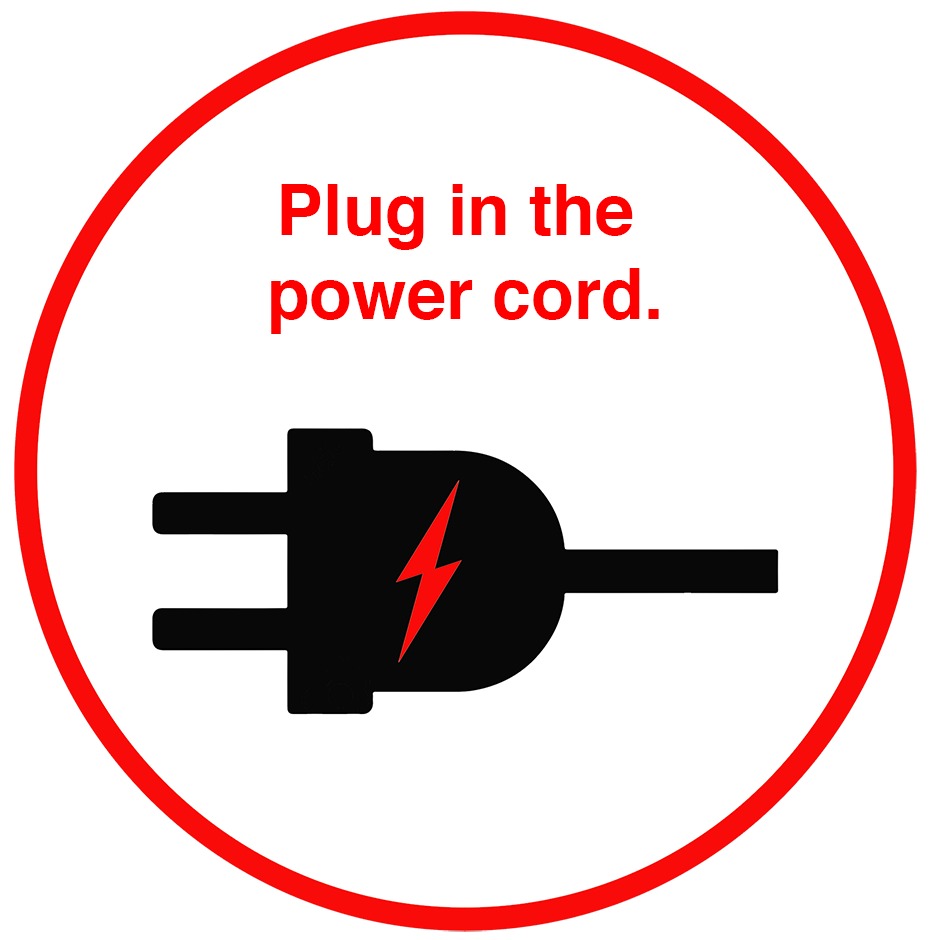
<style>
.page{position:relative;width:930px;height:940px;background:#ffffff}
.page>*{position:absolute;margin:0}
.t1{font:70px "Helvetica-Bold";color:#ff0000}
</style>
<div class="page">
<p class="t1" style="left:271px;top:184px;width:388px;height:150px;text-align:center">Plug in the <br>power cord.</p>
</div>
